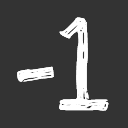
<style>
.page{position:relative;width:128px;height:128px;background:#333333}
.page>*{position:absolute;margin:0}
.t1{font:125px "LoveYaLikeASister-Regular";color:#ffffff}
</style>
<div class="page">
<p class="t1" style="left:17px;top:17px;width:92px;height:94px">-1</p>
</div>
